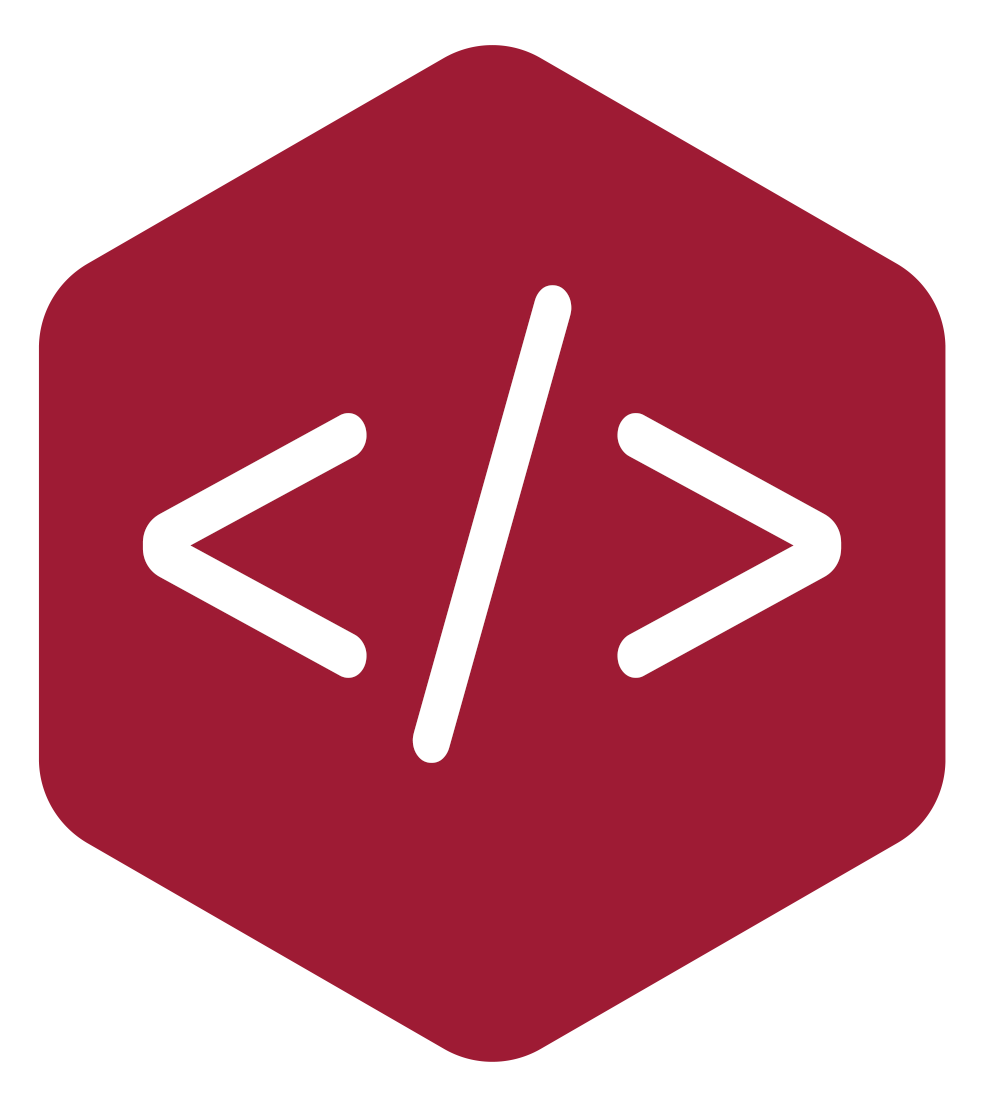
<style>
.page{position:relative;width:985px;height:1107px;background:#9e1b34}
.page>*{position:absolute;margin:0}
.t1{font:555.9px "VarelaRound-Regular";color:#ffffff;scale:0.82 1}
</style>
<div class="page">
<p class="t1" style="left:142px;top:285px;width:700px;height:478px">&lt;/&gt;</p>
</div>
